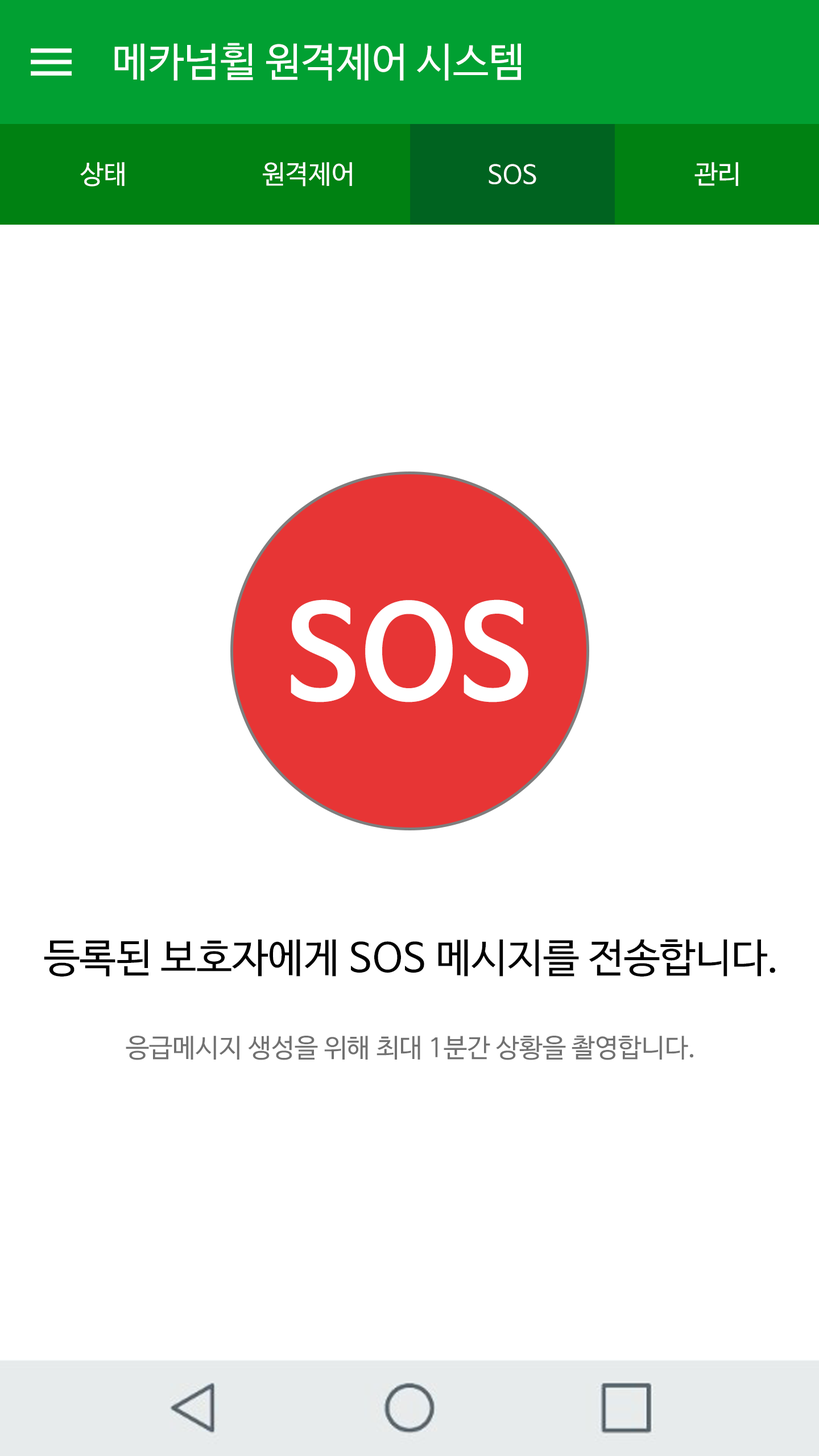
<style>
.page{position:relative;width:819px;height:1456px;background:#ffffff}
.page>*{position:absolute;margin:0}
.t1{font:40.3px "NanumBarunGothicOTF";color:#ffffff}
.t2{font:26.1px "NanumBarunGothicOTF";color:#ffffff}
.t3{font:128.6px "NanumBarunGothicOTFBold";color:#ffffff}
.t4{font:40.3px "NanumBarunGothicOTF";color:#000000}
.t5{font:26.1px "NanumBarunGothicOTF";color:#717171}
</style>
<div class="page">
<p class="t1" style="left:114px;top:43px;width:407px;height:38px">메카넘휠 원격제어 시스템</p>
<p class="t2" style="left:80px;top:162px;width:45px;height:25px">상태</p>
<p class="t2" style="left:263px;top:162px;width:89px;height:25px">원격제어</p>
<p class="t2" style="left:489px;top:164px;width:47px;height:20px">SOS</p>
<p class="t2" style="left:694px;top:162px;width:44px;height:24px">관리</p>
<p class="t3" style="left:291px;top:599px;width:237px;height:103px">SOS</p>
<p class="t4" style="left:44px;top:939px;width:731px;height:38px">등록된 보호자에게 SOS 메시지를 전송합니다.</p>
<p class="t5" style="left:126px;top:1035px;width:567px;height:25px">응급메시지 생성을 위해 최대 1분간 상황을 촬영합니다.</p>
</div>
